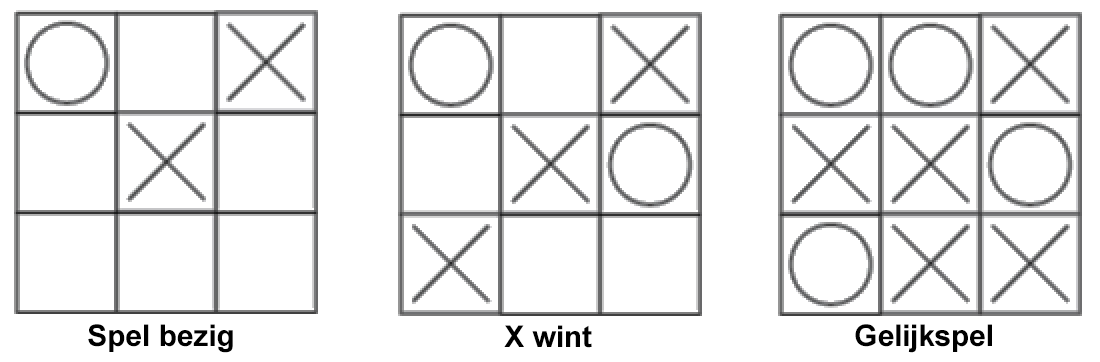
<style>
.page{position:relative;width:1100px;height:362px;background:#ffffff}
.page>*{position:absolute;margin:0}
.t1{font:29.9px "Arial-BoldMT";color:#000000}
</style>
<div class="page">
<p class="t1" style="left:88px;top:324px;width:145px;height:29px">Spel bezig</p>
<p class="t1" style="left:504px;top:325px;width:88px;height:23px">X wint</p>
<p class="t1" style="left:855px;top:324px;width:137px;height:29px">Gelijkspel</p>
</div>
